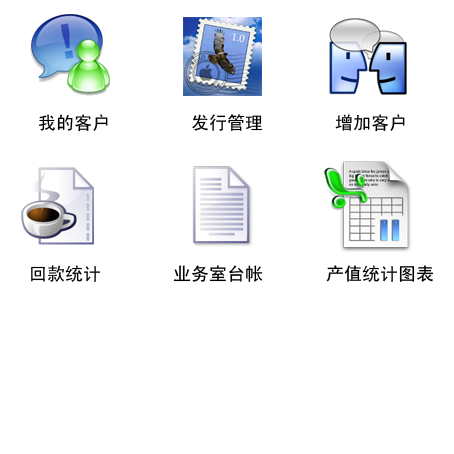
<style>
.page{position:relative;width:454px;height:454px;background:#ffffff}
.page>*{position:absolute;margin:0}
.t1{font:18px "SimHei";color:#000000}
</style>
<div class="page">
<p class="t1" style="left:31px;top:114px;width:403px;height:168px">我的客户         发行管理        增加客户<br><br><br><br><br><br><br> 回款统计        业务室台帐       产值统计图表</p>
</div>
